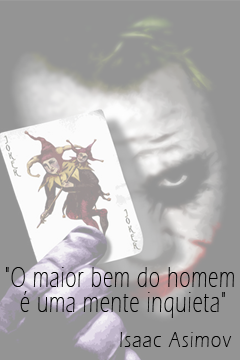
<style>
.page{position:relative;width:240px;height:360px;background:#949494}
.page>*{position:absolute;margin:0}
.t1{font:29.8px/24.9px "ErasITC-Light";letter-spacing:0.08em;color:#000000;scale:0.63 1}
.t2{font:23px "ErasITC-Light";letter-spacing:0.08em;color:#000000;scale:0.79 1}
</style>
<div class="page">
<p class="t1" style="left:6px;top:267px;width:228px;height:51px;text-align:center">"O maior bem do homem <br>é uma mente inquieta"</p>
<p class="t2" style="left:120px;top:332px;width:112px;height:15px">Isaac Asimov</p>
</div>
